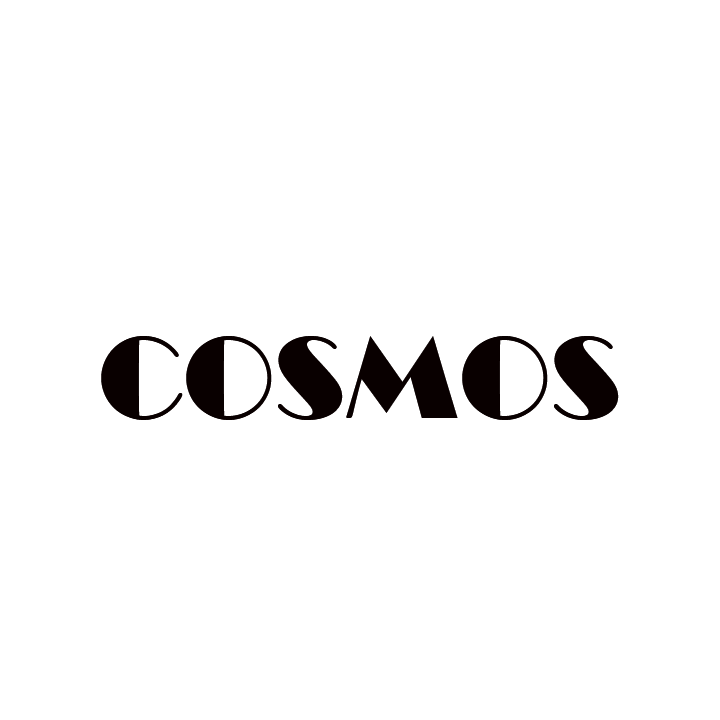
<style>
.page{position:relative;width:720px;height:720px;background:#ffffff}
.page>*{position:absolute;margin:0}
.t1{font:120px "Broadway";color:#090000}
</style>
<div class="page">
<p class="t1" style="left:101px;top:336px;width:518px;height:84px">COSMOS</p>
</div>
